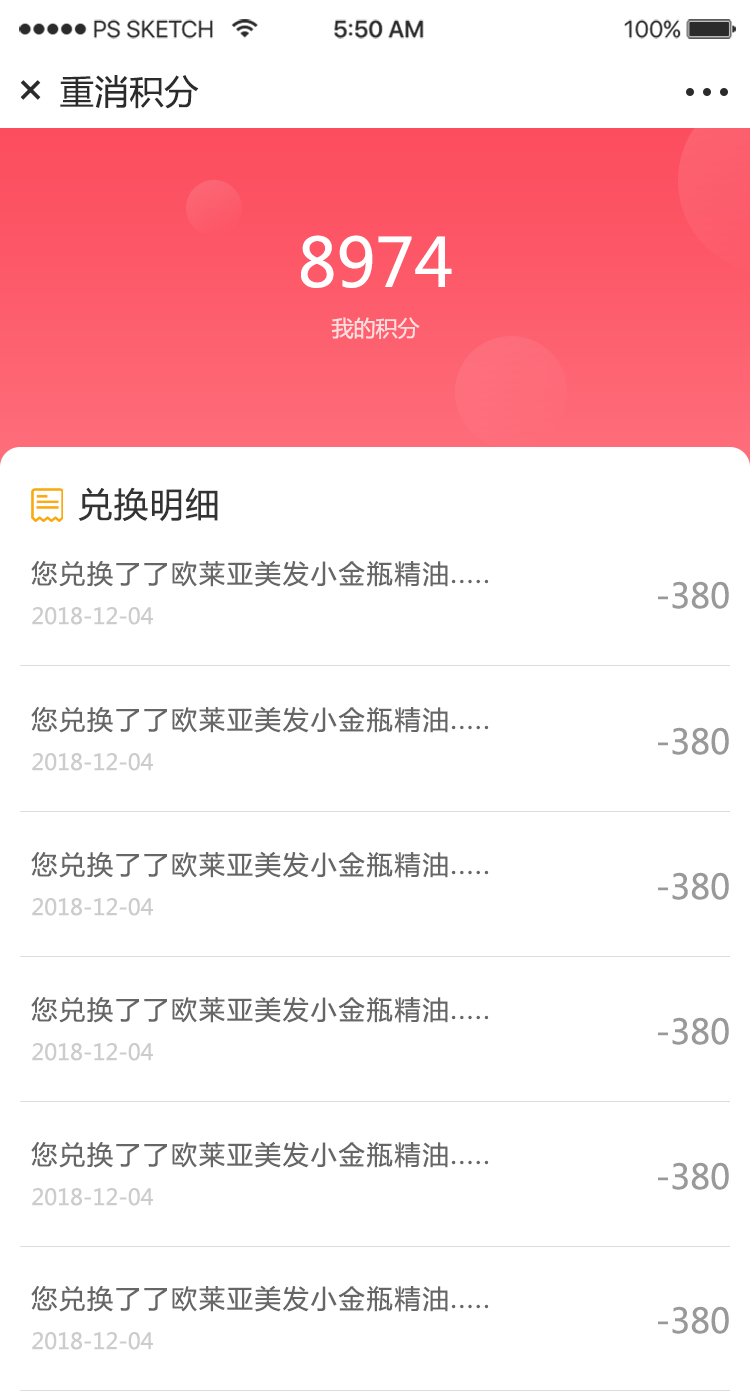
<style>
.page{position:relative;width:750px;height:1392px;background:#ffffff}
.page>*{position:absolute;margin:0}
.t1{font:34px "MicrosoftYaHei";letter-spacing:0.025em;color:#2b2b2b;text-transform:uppercase}
.t2{font:47.9px "MicrosoftYaHei";letter-spacing:0.025em;color:#2b2b2b;text-transform:uppercase}
.t3{font:66.7px "MicrosoftYaHei";color:#ffffff}
.t4{font:22px "MicrosoftYaHei";color:#ffdcde}
.t5{font:34px "MicrosoftYaHei";letter-spacing:0.05em;color:#333333}
.t6{font:26px "MicrosoftYaHei";letter-spacing:0.075em;color:#666666}
.t7{font:34px "MicrosoftYaHei";color:#999999}
.t8{font:22px "MicrosoftYaHei";color:#cccccc}
</style>
<div class="page">
<p class="t1" style="left:60px;top:75px;width:139px;height:34px">重消积分</p>
<p class="t2" style="left:20px;top:80px;width:21px;height:20px;rotate:45deg">+</p>
<p class="t3" style="left:301px;top:235px;width:151px;height:53px">8974</p>
<p class="t4" style="left:331px;top:317px;width:89px;height:22px">我的积分</p>
<p class="t5" style="left:78px;top:487px;width:140px;height:35px">兑换明细</p>
<p class="t6" style="left:31px;top:560px;width:458px;height:27px">您兑换了了欧莱亚美发小金瓶精油.....</p>
<p class="t7" style="left:658px;top:581px;width:71px;height:28px">-380</p>
<p class="t8" style="left:32px;top:607px;width:121px;height:18px">2018-12-04</p>
<p class="t6" style="left:31px;top:706px;width:458px;height:27px">您兑换了了欧莱亚美发小金瓶精油.....</p>
<p class="t7" style="left:658px;top:727px;width:71px;height:28px">-380</p>
<p class="t8" style="left:32px;top:753px;width:121px;height:18px">2018-12-04</p>
<p class="t6" style="left:31px;top:851px;width:458px;height:27px">您兑换了了欧莱亚美发小金瓶精油.....</p>
<p class="t7" style="left:658px;top:872px;width:71px;height:28px">-380</p>
<p class="t8" style="left:32px;top:898px;width:121px;height:18px">2018-12-04</p>
<p class="t6" style="left:31px;top:996px;width:458px;height:27px">您兑换了了欧莱亚美发小金瓶精油.....</p>
<p class="t7" style="left:658px;top:1017px;width:71px;height:28px">-380</p>
<p class="t8" style="left:32px;top:1043px;width:121px;height:18px">2018-12-04</p>
<p class="t6" style="left:31px;top:1141px;width:458px;height:27px">您兑换了了欧莱亚美发小金瓶精油.....</p>
<p class="t7" style="left:658px;top:1162px;width:71px;height:28px">-380</p>
<p class="t8" style="left:32px;top:1188px;width:121px;height:18px">2018-12-04</p>
<p class="t6" style="left:31px;top:1285px;width:458px;height:27px">您兑换了了欧莱亚美发小金瓶精油.....</p>
<p class="t7" style="left:658px;top:1306px;width:71px;height:28px">-380</p>
<p class="t8" style="left:32px;top:1332px;width:121px;height:18px">2018-12-04</p>
</div>
